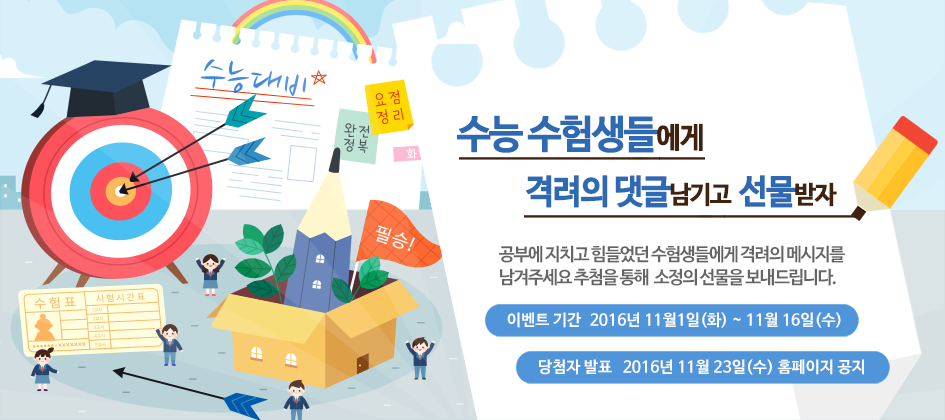
<style>
.page{position:relative;width:945px;height:420px;background:#ffffff}
.page>*{position:absolute;margin:0}
.t1{font:39.1px "NanumBarunGothicBold";letter-spacing:-0.075em;color:#2e6ab3;font-weight:bold}
.t2{font:28.7px "NanumBarunGothicBold";letter-spacing:-0.075em;color:#40220f;font-weight:bold}
.t3{font:33.8px "NanumBarunGothicBold";letter-spacing:-0.075em;color:#2e6ab3;font-weight:bold}
.t4{font:24.8px "NanumBarunGothicBold";letter-spacing:-0.075em;color:#40220f;font-weight:bold}
.t5{font:18px/23px "NanumBarunGothicBold";letter-spacing:-0.075em;color:#656565}
.t6{font:15.8px "NanumBarunGothicBold";color:#ffffff}
</style>
<div class="page">
<p class="t1" style="left:457px;top:115px;width:246px;height:38px">수능 수험생들<span class="t2">에게</span></p>
<p class="t3" style="left:526px;top:175px;width:311px;height:33px">격려의 댓글<span class="t4">남기고  </span>선물<span class="t4">받자</span></p>
<p class="t5" style="left:499px;top:245px;width:346px;height:41px">공부에 지치고 힘들었던 수험생들에게 격려의 메시지를<br>남겨주세요 추첨을 통해  소정의 선물을 보내드립니다.</p>
<p class="t6" style="left:507px;top:312px;width:74px;height:16px">이벤트 기간</p>
<p class="t6" style="left:590px;top:312px;width:251px;height:16px">2016년 11월1일(화) ~ 11월 16일(수)</p>
<p class="t6" style="left:539px;top:359px;width:73px;height:16px">당첨자 발표</p>
<p class="t6" style="left:623px;top:359px;width:241px;height:16px">2016년 11월 23일(수) 홈페이지 공지</p>
</div>
